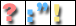
<style>
.page{position:relative;width:76px;height:26px;background:#ffffff}
.page>*{position:absolute;margin:0}
.t1{font:24px "FZCCHJW--GB1-0";letter-spacing:0.1em;color:#ff8484}
.t2{font:24px "FZCCHJW--GB1-0";letter-spacing:0.1em;color:#5dbaff}
.t3{font:24px "FZCCHJW--GB1-0";letter-spacing:0.1em;color:#fbe881}
</style>
<div class="page">
<p class="t1" style="left:2px;top:3px;width:14px;height:18px">?</p>
<p class="t2" style="left:27px;top:2px;width:21px;height:20px">:”</p>
<p class="t3" style="left:54px;top:4px;width:6px;height:18px">!</p>
</div>
